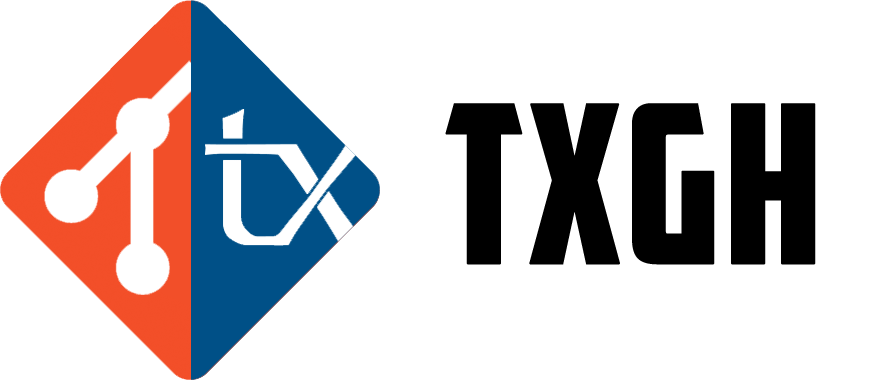
<style>
.page{position:relative;width:878px;height:380px;background:#ffffff}
.page>*{position:absolute;margin:0}
.t1{font:220px "AmericanCaptain";color:#000000;font-weight:bold}
</style>
<div class="page">
<p class="t1" style="left:445px;top:103px;width:371px;height:162px">txgh</p>
</div>
